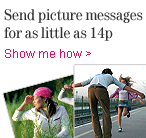
<style>
.page{position:relative;width:146px;height:138px;background:#ffffff}
.page>*{position:absolute;margin:0}
.t1{font:16px/18px "Tele-Antiqua";color:#333333}
.t2{font:12px "ArialMT";color:#ff0066}
</style>
<div class="page">
<p class="t1" style="left:4px;top:9px;width:139px;height:32px">Send picture messages<br>for as little as 14p</p>
<p class="t2" style="left:5px;top:49px;width:86px;height:9px">Show me how &gt;</p>
</div>
